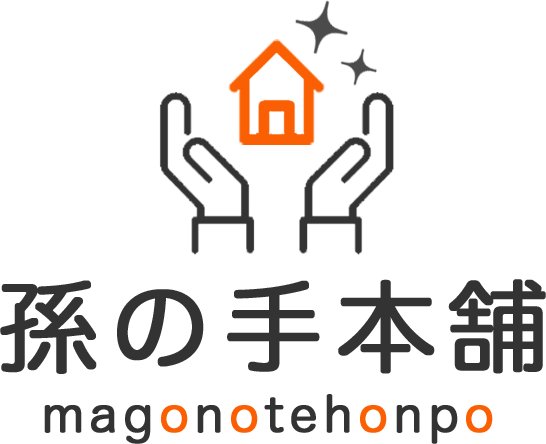
<style>
.page{position:relative;width:546px;height:444px;background:#ffffff}
.page>*{position:absolute;margin:0}
.t1{font:100px "HiraMaruProN-W4";letter-spacing:0.1em;color:#333333;font-weight:bold}
.t2{font:48px "HiraMaruProN-W4";letter-spacing:0.1em;color:#333333;font-weight:bold}
.t3{font:48px "HiraMaruProN-W4";letter-spacing:0.1em;color:#fa6003;font-weight:bold}
</style>
<div class="page">
<p class="t1" style="left:0px;top:279px;width:546px;height:95px">孫の手本舗</p>
<p class="t2" style="left:44px;top:394px;width:449px;height:50px">mag<span class="t3">o</span>n<span class="t3">o</span>teh<span class="t3">o</span>np<span class="t3">o</span></p>
</div>
